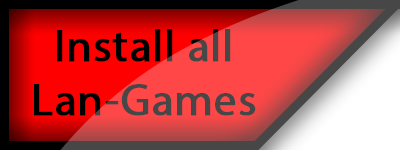
<style>
.page{position:relative;width:400px;height:150px}
.page>*{position:absolute;margin:0}
.t1{font:45px "MyriadPro-Regular";font-weight:bold}
</style>
<div class="page">
<p class="t1" style="left:34px;top:29px;width:222px;height:87px;text-align:center">Install all<br>Lan-Games</p>
</div>
